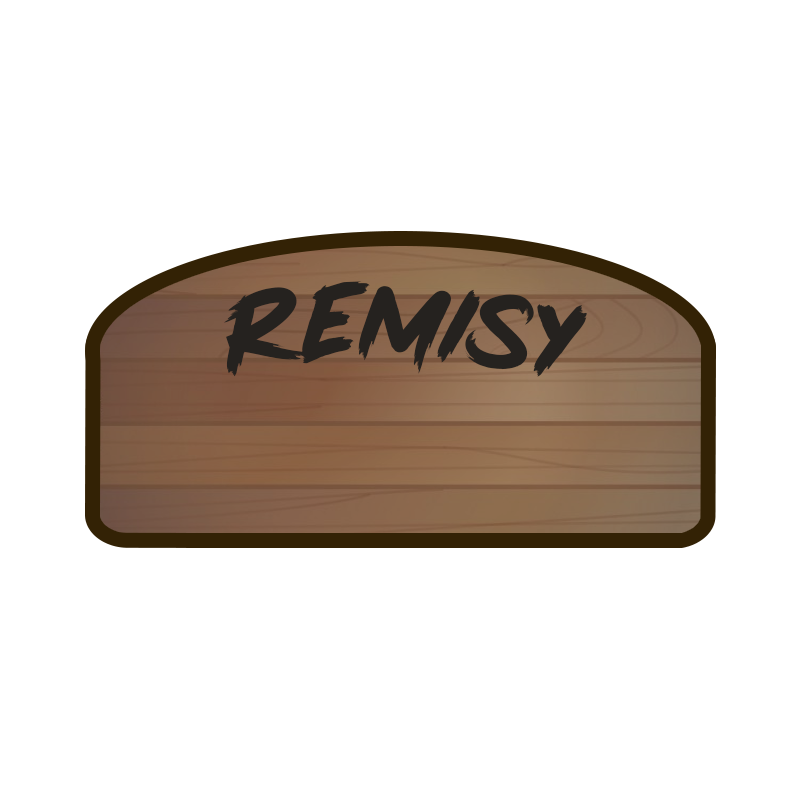
<style>
.page{position:relative;width:800px;height:800px;background:#ffffff}
.page>*{position:absolute;margin:0}
.t1{font:119.5px "PinkBlue";color:#25221f}
</style>
<div class="page">
<p class="t1" style="left:223px;top:281px;width:364px;height:96px;rotate:1deg">Remisy</p>
</div>
